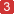
<style>
.page{position:relative;width:14px;height:14px;background:#cf3434}
.page>*{position:absolute;margin:0}
.t1{font:12px "ArialMT";color:#ffffff}
</style>
<div class="page">
<p class="t1" style="left:4px;top:2px;width:6px;height:9px">3</p>
</div>
